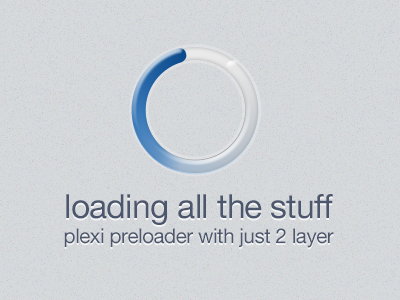
<style>
.page{position:relative;width:400px;height:300px}
.page>*{position:absolute;margin:0}
.t1{font:20.4px/24.8px "HelveticaNeue";letter-spacing:-0.02em;color:#4c566c}
.t2{font:33.4px/51.8px "HelveticaNeue";letter-spacing:-0.02em;color:#4c566c}
</style>
<div class="page">
<p class="t1" style="left:64px;top:194px;width:270px;height:54px;text-align:center"><span class="t2">loading all the stuff<br></span>plexi preloader with just 2 layer</p>
</div>
